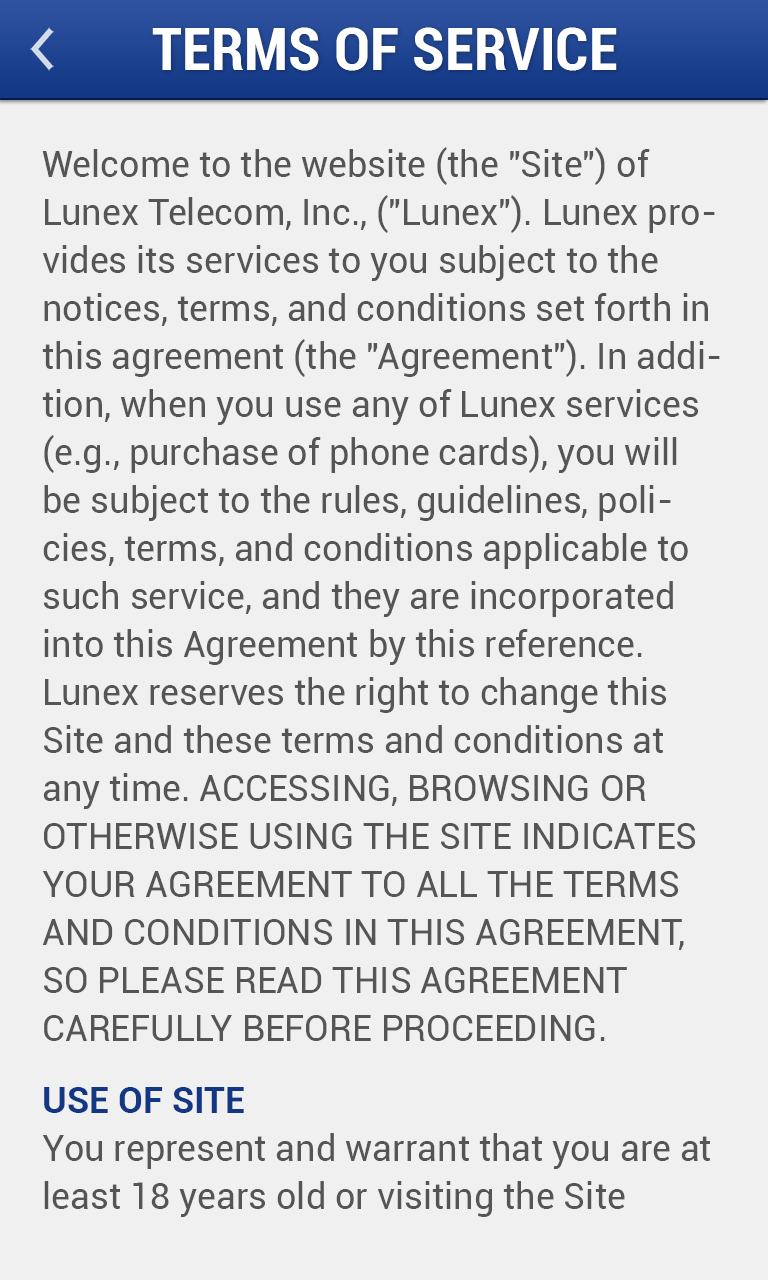
<style>
.page{position:relative;width:768px;height:1280px;background:#f0f0f0}
.page>*{position:absolute;margin:0}
.t1{font:60px "Roboto-BoldCondensed";color:#ffffff}
.t2{font:36px/48px "Roboto-Regular";color:#555555}
.t3{font:36px/48px "Roboto-Bold";color:#123785}
</style>
<div class="page">
<p class="t1" style="left:152px;top:27px;width:465px;height:44px">TERMS OF SERVICE</p>
<p class="t2" style="left:42px;top:147px;width:678px;height:1070px">Welcome to the website (the "Site") of Lunex Telecom, Inc., ("Lunex"). Lunex provides its services to you subject to the notices, terms, and conditions set forth in this agreement (the "Agreement"). In addition, when you use any of Lunex services (e.g., purchase of phone cards), you will be subject to the rules, guidelines, policies, terms, and conditions applicable to such service, and they are incorporated into this Agreement by this reference. Lunex reserves the right to change this Site and these terms and conditions at any time. ACCESSING, BROWSING OR OTHERWISE USING THE SITE INDICATES YOUR AGREEMENT TO ALL THE TERMS AND CONDITIONS IN THIS AGREEMENT, SO PLEASE READ THIS AGREEMENT CAREFULLY BEFORE PROCEEDING.<br><span class="t3">USE OF SITE<br></span>You represent and warrant that you are at least 18 years old or visiting the Site</p>
</div>
